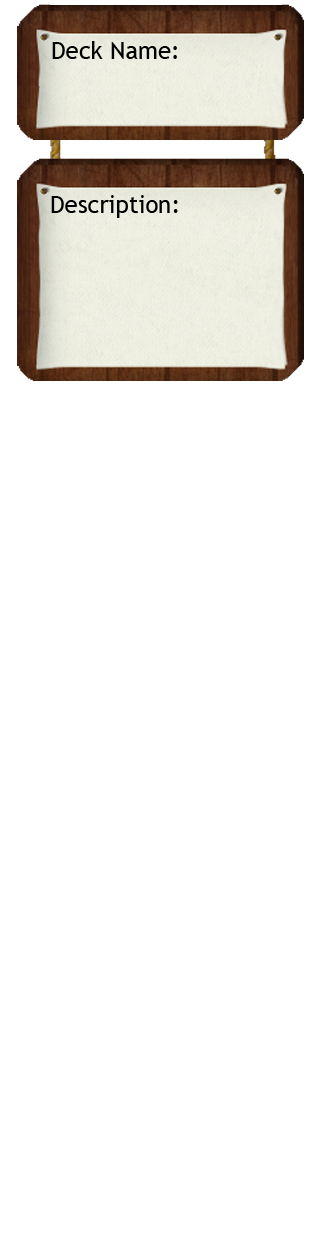
<style>
.page{position:relative;width:320px;height:1248px;background:#ffffff}
.page>*{position:absolute;margin:0}
.t1{font:24px "TrebuchetMS";color:#000000}
</style>
<div class="page">
<p class="t1" style="left:52px;top:41px;width:125px;height:18px">Deck Name:</p>
<p class="t1" style="left:51px;top:195px;width:127px;height:23px">Description:</p>
</div>
